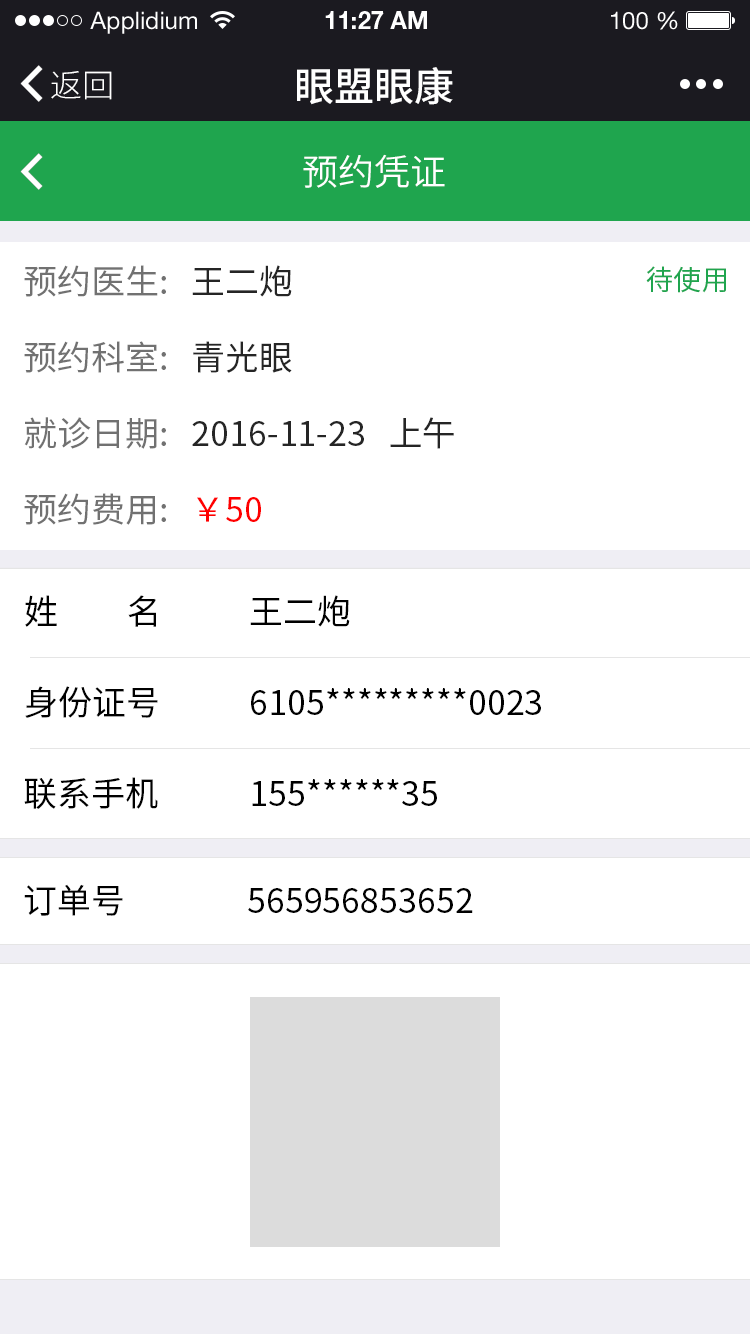
<style>
.page{position:relative;width:750px;height:1334px;background:#ffffff}
.page>*{position:absolute;margin:0}
.t1{font:24px "HelveticaNeueLTStd-Roman";color:#ffffff}
.t2{font:24px "HelveticaNeueLTStd-Bd";color:#ffffff}
.t3{font:32px "SourceHanSansCN-Light";color:#ffffff}
.t4{font:40px "SourceHanSansCN-Medium";color:#ffffff}
.t5{font:36px "SourceHanSansCN-Normal";color:#ffffff}
.t6{font:34px/80px "SourceHanSansCN-Regular";color:#252525}
.t7{font:34px/80px "SourceHanSansCN-Regular";color:#717171}
.t8{font:34px/80px "SourceHanSansCN-Regular";color:#ff0000}
.t9{font:28px "SourceHanSansCN-Regular";color:#1fa54e}
.t10{font:34.1px "SourceHanSansCN-Regular";color:#000000}
.t11{font:34px "SourceHanSansCN-Regular";color:#000000}
</style>
<div class="page">
<p class="t1" style="left:90px;top:11px;width:107px;height:23px">Applidium</p>
<p class="t2" style="left:325px;top:11px;width:102px;height:18px">11:27 AM</p>
<p class="t1" style="left:611px;top:11px;width:67px;height:19px">100 %</p>
<p class="t3" style="left:51px;top:71px;width:61px;height:29px">返回</p>
<p class="t4" style="left:297px;top:67px;width:156px;height:38px">眼盟眼康</p>
<p class="t5" style="left:303px;top:154px;width:142px;height:34px">预约凭证</p>
<p class="t6" style="left:24px;top:265px;width:430px;height:260px"><span class="t7">预约医生:   </span>王二炮<br><span class="t7">预约科室:   </span>青光眼<br><span class="t7">就诊日期:   </span>2016-11-23   上午<br><span class="t7">预约费用:   </span><span class="t8">￥50</span></p>
<p class="t9" style="left:646px;top:266px;width:80px;height:27px">待使用</p>
<p class="t10" style="left:25px;top:595px;width:131px;height:32px">姓         名</p>
<p class="t10" style="left:250px;top:595px;width:100px;height:32px">王二炮</p>
<p class="t10" style="left:25px;top:686px;width:133px;height:32px">身份证号</p>
<p class="t10" style="left:251px;top:688px;width:290px;height:27px">6105*********0023</p>
<p class="t10" style="left:24px;top:777px;width:134px;height:32px">联系手机</p>
<p class="t10" style="left:252px;top:779px;width:185px;height:27px">155******35</p>
<p class="t11" style="left:24px;top:884px;width:99px;height:32px">订单号</p>
<p class="t11" style="left:248px;top:888px;width:225px;height:25px">565956853652</p>
</div>
